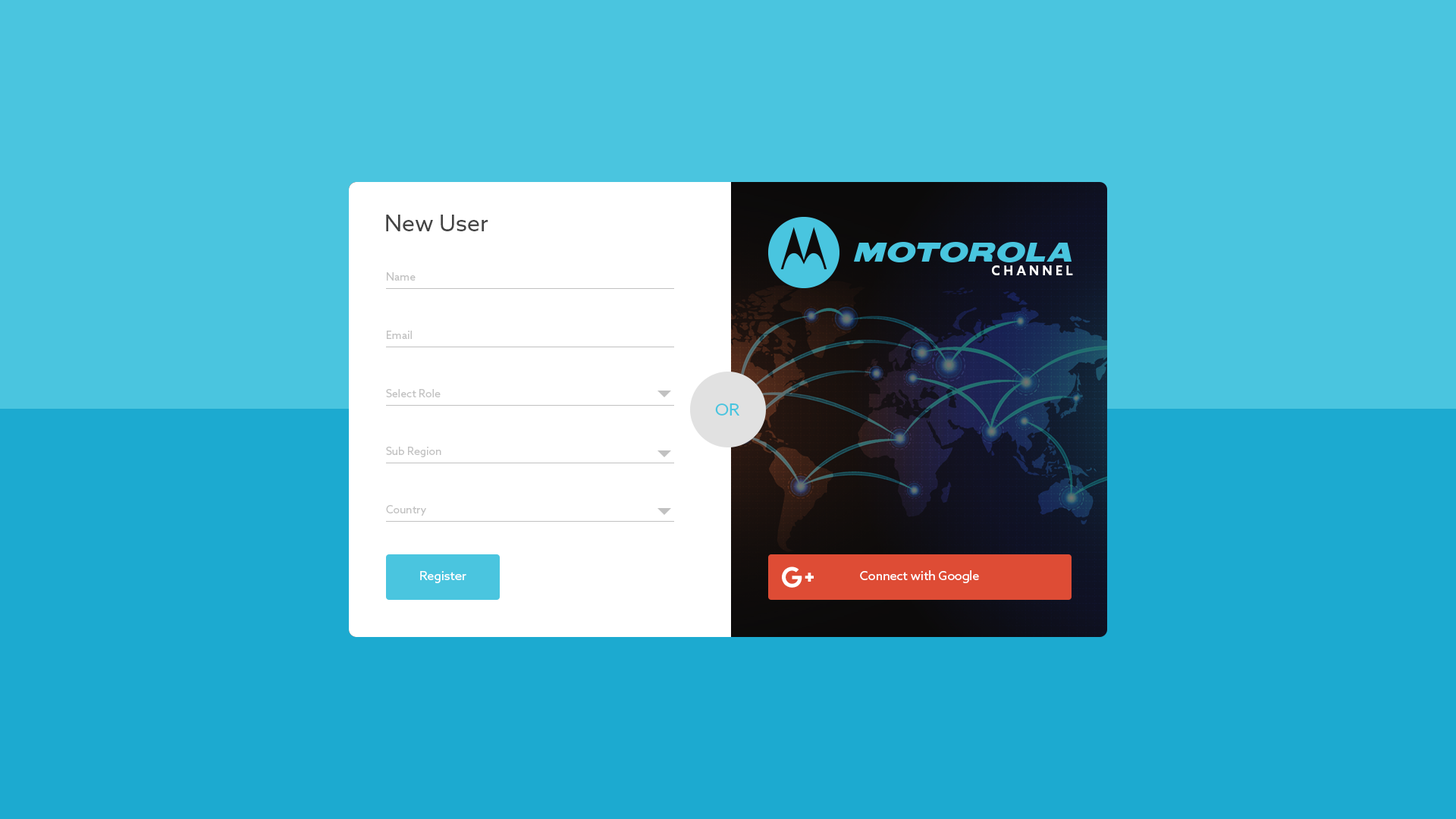
<style>
.page{position:relative;width:1456px;height:819px;background:#4ac5df}
.page>*{position:absolute;margin:0}
.t1{font:22.7px "AzoSans-Regular";color:#444444}
.t2{font:12.9px "AzoSans-Bold";letter-spacing:0.24em;color:#ffffff}
.t3{font:10.6px "AzoSans-Regular";color:#c1c1c1}
.t4{font:16.7px "AzoSans-Regular";color:#49c5df}
.t5{font:12.1px "AzoSans-Regular";color:#ffffff}
</style>
<div class="page">
<p class="t1" style="left:386px;top:215px;width:102px;height:16px">New User</p>
<p class="t2" style="left:992px;top:265px;width:81px;height:10px">CHANNEL</p>
<p class="t3" style="left:387px;top:272px;width:29px;height:9px">Name</p>
<p class="t3" style="left:387px;top:331px;width:25px;height:8px">Email</p>
<p class="t3" style="left:386px;top:389px;width:55px;height:8px">Select Role</p>
<p class="t4" style="left:715px;top:403px;width:24px;height:13px">OR</p>
<p class="t3" style="left:386px;top:447px;width:55px;height:10px">Sub Region</p>
<p class="t3" style="left:386px;top:505px;width:40px;height:11px">Country</p>
<p class="t5" style="left:420px;top:571px;width:46px;height:12px">Register</p>
<p class="t5" style="left:860px;top:570px;width:119px;height:13px">Connect with Google</p>
</div>
